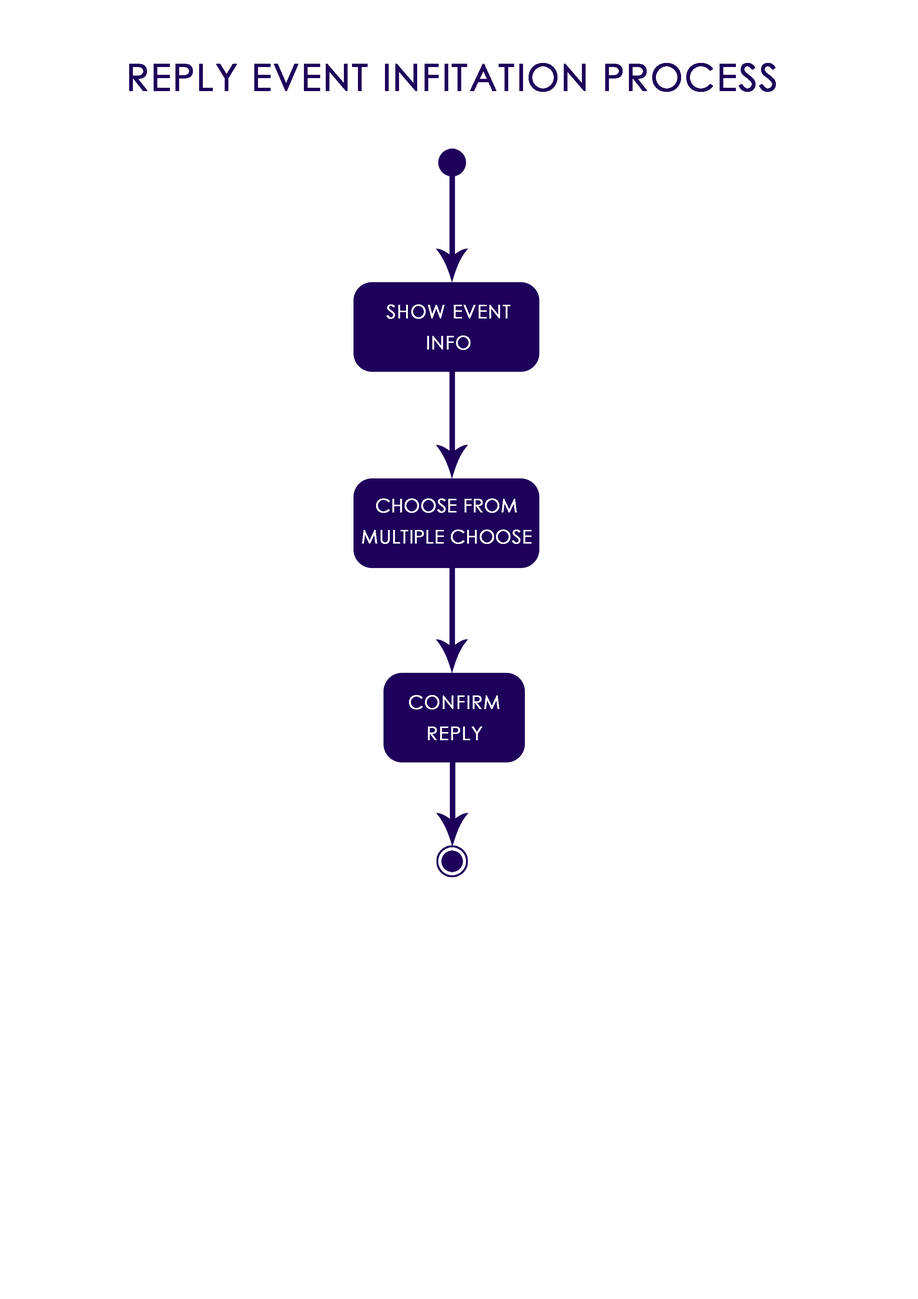
<style>
.page{position:relative;width:918px;height:1299px;background:#ffffff}
.page>*{position:absolute;margin:0}
.t1{font:37px "CenturyGothic";letter-spacing:0.025em;color:#1e005a;text-transform:uppercase;font-weight:bold}
.t2{font:18.5px/30.9px "CenturyGothic";letter-spacing:0.025em;color:#ffffff;text-transform:uppercase;font-weight:bold}
.t3{font:18.5px/30.9px "CenturyGothic";color:#ffffff;text-transform:uppercase;font-weight:bold}
</style>
<div class="page">
<p class="t1" style="left:129px;top:63px;width:647px;height:29px">reply event infitation process</p>
<p class="t2" style="left:387px;top:304px;width:124px;height:46px;text-align:center">show event<br>info</p>
<p class="t3" style="left:362px;top:498px;width:170px;height:46px;text-align:center">choose from multiple choose</p>
<p class="t2" style="left:409px;top:695px;width:90px;height:45px;text-align:center">confirm<br>reply</p>
</div>
